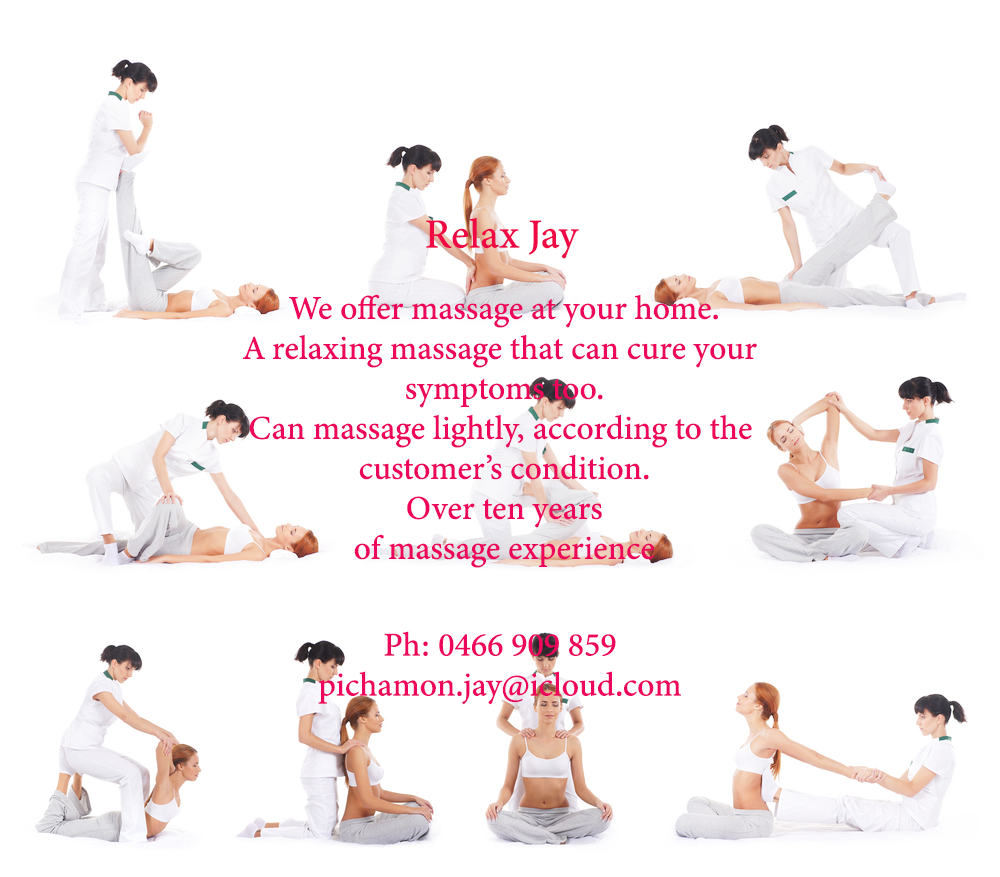
<style>
.page{position:relative;width:1000px;height:877px;background:#ffffff}
.page>*{position:absolute;margin:0}
.t1{font:41.7px "MinionConceptRoman-Medium";color:#ef0945}
.t2{font:33.3px "MinionConceptRoman-Medium";color:#ed065b}
</style>
<div class="page">
<p class="t1" style="left:426px;top:217px;width:153px;height:42px">Relax Jay</p>
<p class="t2" style="left:242px;top:294px;width:515px;height:274px;text-align:center">We offer massage at your home.<br>A relaxing massage that can cure your <br>symptoms too.<br>Can massage lightly, according to the <br>customer’s condition.<br>Over ten years<br>of massage experience</p>
<p class="t2" style="left:318px;top:631px;width:363px;height:74px;text-align:center">Ph: 0466 909 859<br>pichamon.jay@icloud.com</p>
</div>
